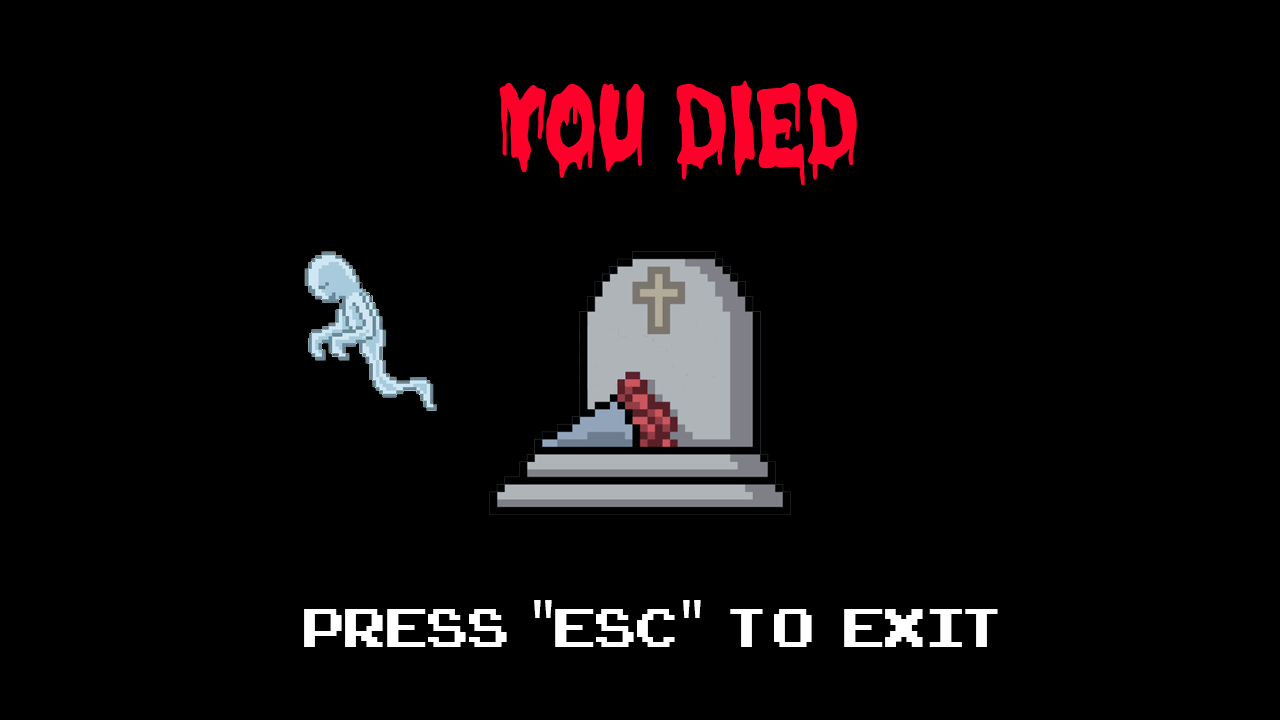
<style>
.page{position:relative;width:1280px;height:720px;background:#000000}
.page>*{position:absolute;margin:0}
.t1{font:125px "HalloweenMorning";color:#ff002b}
.t2{font:75px "ArcadeClassic";color:#ffffff}
.t3{font:75px "MyriadPro-Regular";color:#ffffff}
</style>
<div class="page">
<p class="t1" style="left:499px;top:80px;width:358px;height:105px">YOU DIED</p>
<p class="t2" style="left:304px;top:600px;width:694px;height:47px">press  <span class="t3">"</span>ESC<span class="t3">"</span>   to   exit</p>
</div>
